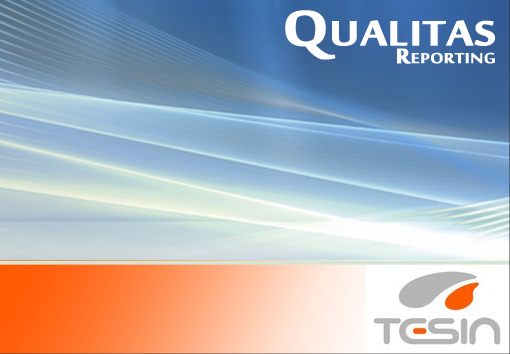
<style>
.page{position:relative;width:510px;height:354px}
.page>*{position:absolute;margin:0}
.t1{font:31.8px/18px "MoolBoran";color:#ffffff;font-variant:small-caps;font-weight:bold;scale:1.17 1}
.t2{font:76.3px/0px "MoolBoran";color:#ffffff;font-variant:small-caps;font-weight:bold;scale:1.17 1}
</style>
<div class="page">
<p class="t1" style="left:285px;top:10px;width:210px;height:54px;text-align:right"><span class="t2">Qualitas<br></span>Reporting</p>
</div>
